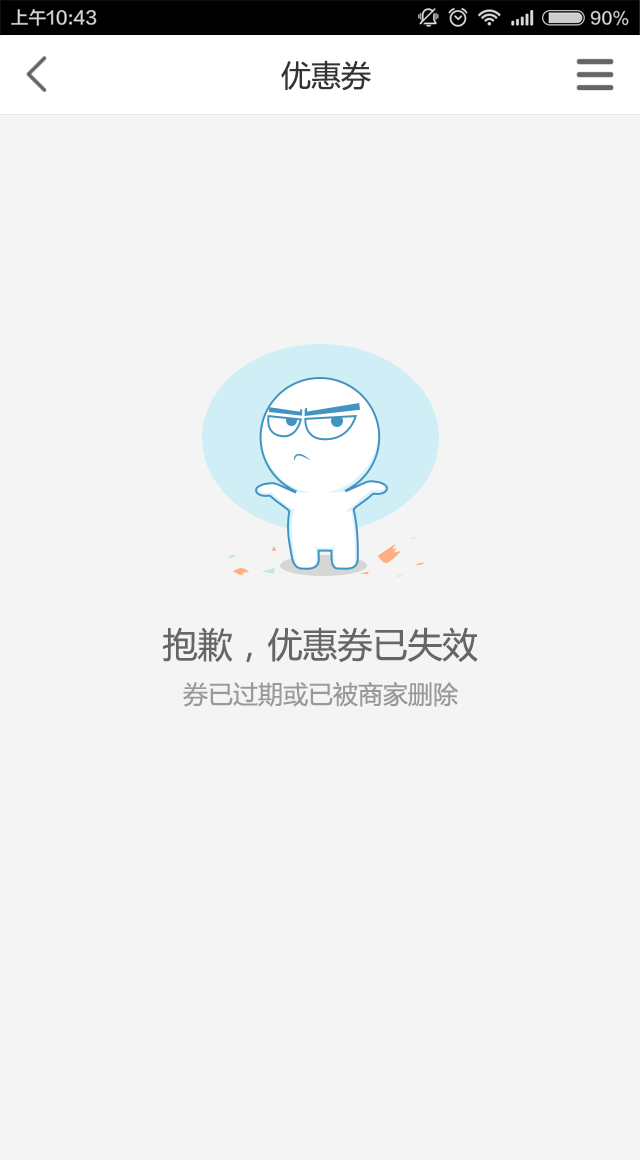
<style>
.page{position:relative;width:640px;height:1160px;background:#f4f4f4}
.page>*{position:absolute;margin:0}
.t1{font:30px "MicrosoftYaHeiUI";color:#333333}
.t2{font:35px "MicrosoftYaHeiUI";color:#666666}
.t3{font:25px "MicrosoftYaHeiUI";color:#999999}
</style>
<div class="page">
<p class="t1" style="left:281px;top:60px;width:90px;height:31px">优惠券</p>
<p class="t2" style="left:163px;top:627px;width:315px;height:35px">抱歉，优惠券已失效</p>
<p class="t3" style="left:183px;top:681px;width:275px;height:26px">券已过期或已被商家删除</p>
</div>
